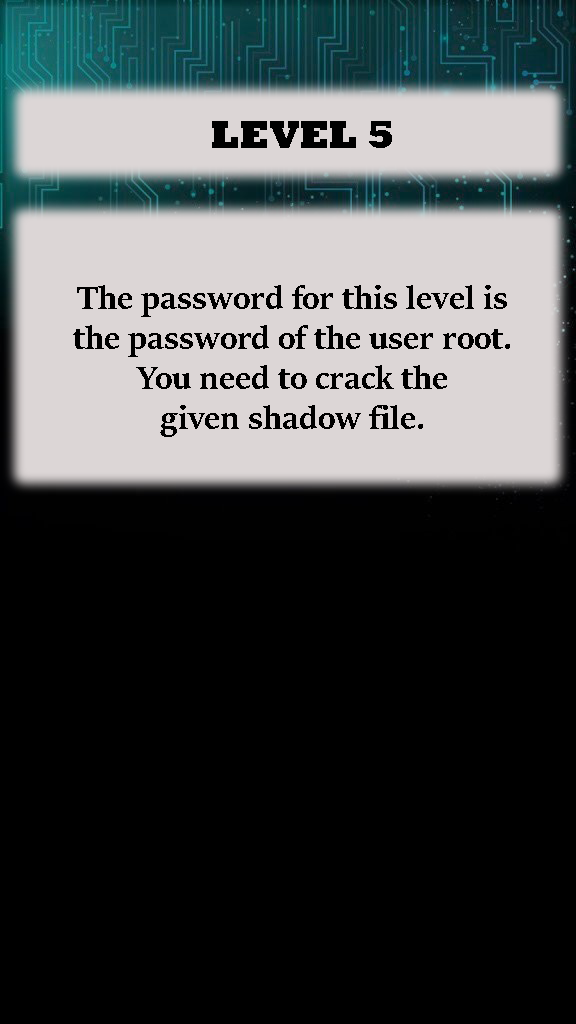
<style>
.page{position:relative;width:576px;height:1024px;background:#000000}
.page>*{position:absolute;margin:0}
.t1{font:40px "Rockwell-ExtraBold";color:#000000}
.t2{font:36px/10px "SitkaBanner-Bold";color:#000000}
</style>
<div class="page">
<p class="t1" style="left:212px;top:121px;width:180px;height:27px">LEVEL 5</p>
<p class="t2" style="left:73px;top:285px;width:437px;height:152px;text-align:center">The password for this level is<br> <br><br><br>the password of the user root. <br><br><br><br>You need to crack the <br><br><br><br>given shadow file.</p>
</div>
